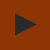
<style>
.page{position:relative;width:50px;height:50px;background:#8d3503}
.page>*{position:absolute;margin:0}
.t1{font:36.5px "CourierNewPS-BoldMT";color:#2a2a2a}
</style>
<div class="page">
<p class="t1" style="left:15px;top:13px;width:22px;height:23px">►</p>
</div>
